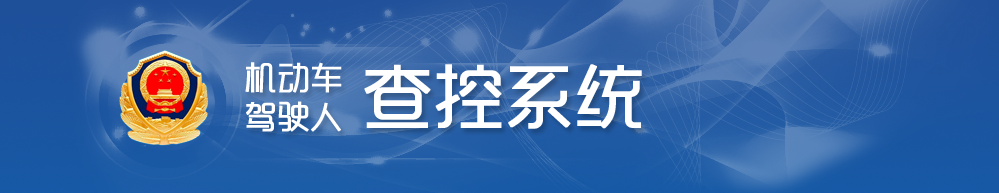
<style>
.page{position:relative;width:999px;height:193px}
.page>*{position:absolute;margin:0}
.t1{font:32px "RTWSYueGoTrial-Regular";color:#ffffff;font-weight:bold}
.t2{font:68.9px "RTWSYueGoTrial-Regular";color:#ffffff;font-weight:bold}
</style>
<div class="page">
<p class="t1" style="left:245px;top:62px;width:97px;height:31px">机动车</p>
<p class="t2" style="left:364px;top:64px;width:278px;height:65px">查控系统</p>
<p class="t1" style="left:246px;top:101px;width:95px;height:31px">驾驶人</p>
</div>
